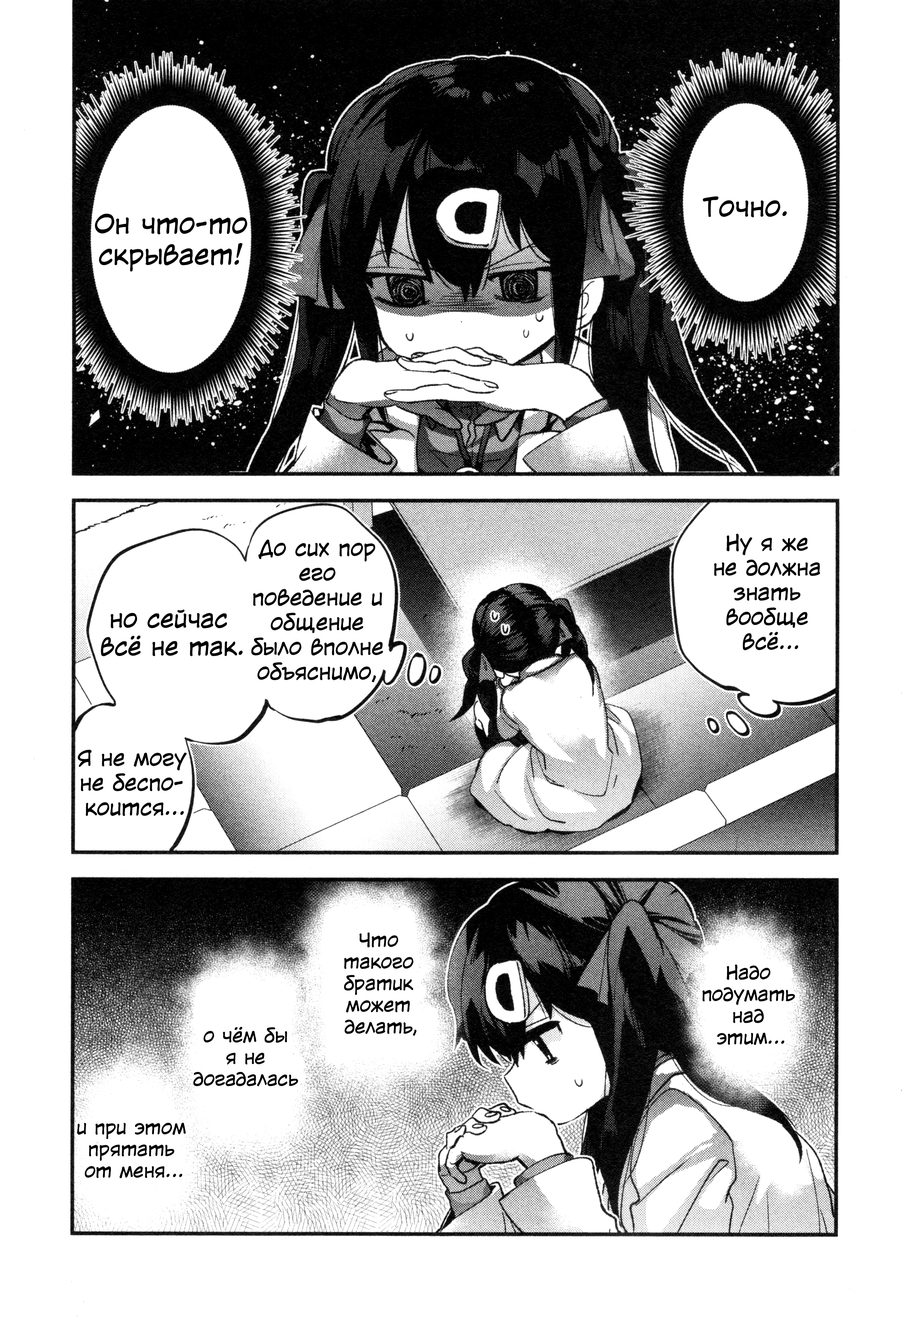
<style>
.page{position:relative;width:904px;height:1320px;background:#ffffff}
.page>*{position:absolute;margin:0}
.t1{font:25.8px "v_CCWildWordsLower";color:#000000}
.t2{font:20.6px "v_CCWildWordsLower";color:#000000}
.t3{font:23.2px "v_CCWildWordsLower";color:#000000}
.t4{font:18px "v_CCWildWordsLower";color:#000000}
</style>
<div class="page">
<p class="t1" style="left:702px;top:196px;width:84px;height:21px">Точно.</p>
<p class="t1" style="left:95px;top:214px;width:152px;height:57px;text-align:center">Он что-то скрывает!я</p>
<p class="t2" style="left:714px;top:533px;width:106px;height:117px;text-align:center">Ну я же <br>не должна знать <br>вообще <br> всё...</p>
<p class="t2" style="left:251px;top:539px;width:132px;height:143px;text-align:center">До сих пор его поведение и общение было вполне объяснимо,</p>
<p class="t3" style="left:101px;top:609px;width:141px;height:47px;text-align:center">но сейчас <br>всё не так.</p>
<p class="t2" style="left:78px;top:750px;width:109px;height:66px;text-align:center">Я не могу   не беспо-<br>коится...</p>
<p class="t4" style="left:344px;top:932px;width:73px;height:104px;text-align:center">Что такого<br>братик<br>может делать,</p>
<p class="t4" style="left:702px;top:964px;width:93px;height:81px;text-align:center">Надо подумать над этим...</p>
<p class="t4" style="left:193px;top:1027px;width:105px;height:59px;text-align:center">о чём бы<br>я не догадалась</p>
<p class="t4" style="left:77px;top:1122px;width:109px;height:56px;text-align:center">и при этом прятать от меня...</p>
</div>
